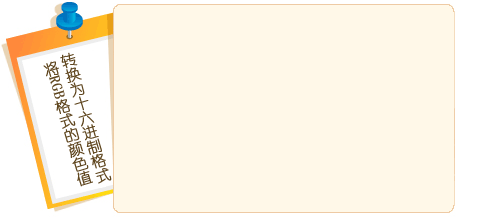
<style>
.page{position:relative;width:488px;height:217px;background:#fff8e8}
.page>*{position:absolute;margin:0}
.t1{font:15px "YouYuan";color:#604720;font-weight:bold}
</style>
<div class="page">
<p class="t1" style="left:60px;top:52px;width:52px;height:132px;rotate:-17deg">转换为十六进制格式</p>
<p class="t1" style="left:43px;top:61px;width:50px;height:126px;rotate:-17deg">将RGB格式的颜色值</p>
</div>
